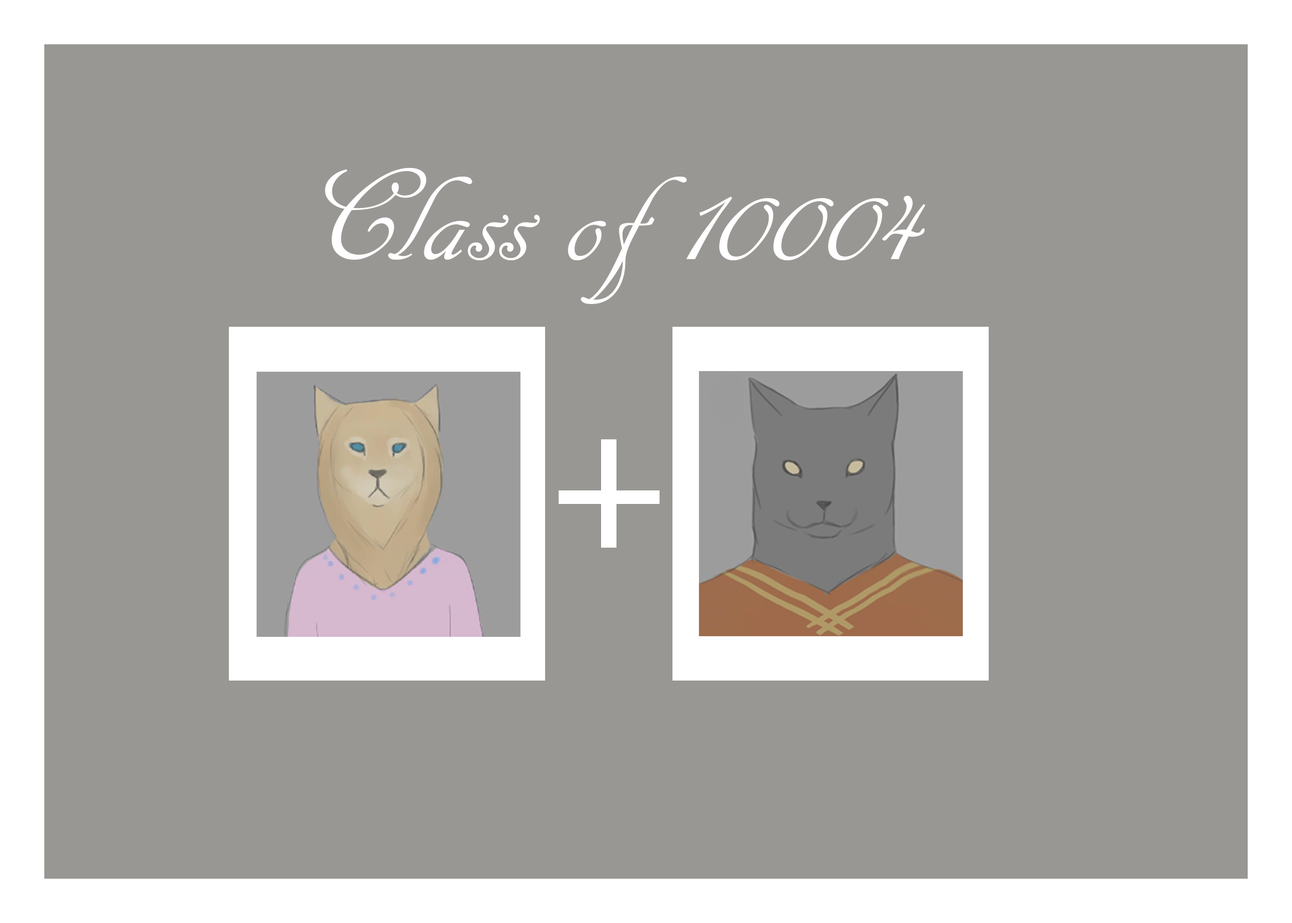
<style>
.page{position:relative;width:1292px;height:923px;background:#989793}
.page>*{position:absolute;margin:0}
.t1{font:138.5px "ARDECODE";color:#ffffff}
</style>
<div class="page">
<p class="t1" style="left:325px;top:167px;width:600px;height:137px">Class of 10004</p>
</div>
